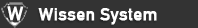
<style>
.page{position:relative;width:198px;height:28px;background:#333333}
.page>*{position:absolute;margin:0}
.t1{font:19.3px "DINAlternate-Bold";letter-spacing:0.01em;color:#ffffff;font-weight:bold}
.t2{font:17px "DINAlternate-Bold";letter-spacing:0.01em;color:#ffffff;font-weight:bold}
</style>
<div class="page">
<p class="t1" style="left:7px;top:6px;width:17px;height:15px;rotate:1deg">W</p>
<p class="t2" style="left:38px;top:8px;width:119px;height:17px">Wissen System</p>
</div>
